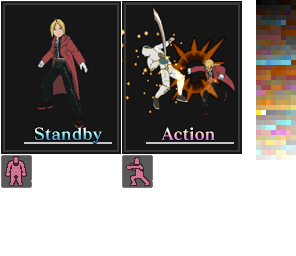
<style>
.page{position:relative;width:296px;height:256px;background:#ffffff}
.page>*{position:absolute;margin:0}
.t1{font:16px "MatissePro-B";letter-spacing:0.01em}
</style>
<div class="page">
<p class="t1" style="left:35px;top:127px;width:67px;height:16px">Standby</p>
<p class="t1" style="left:161px;top:127px;width:54px;height:13px">Action</p>
</div>
